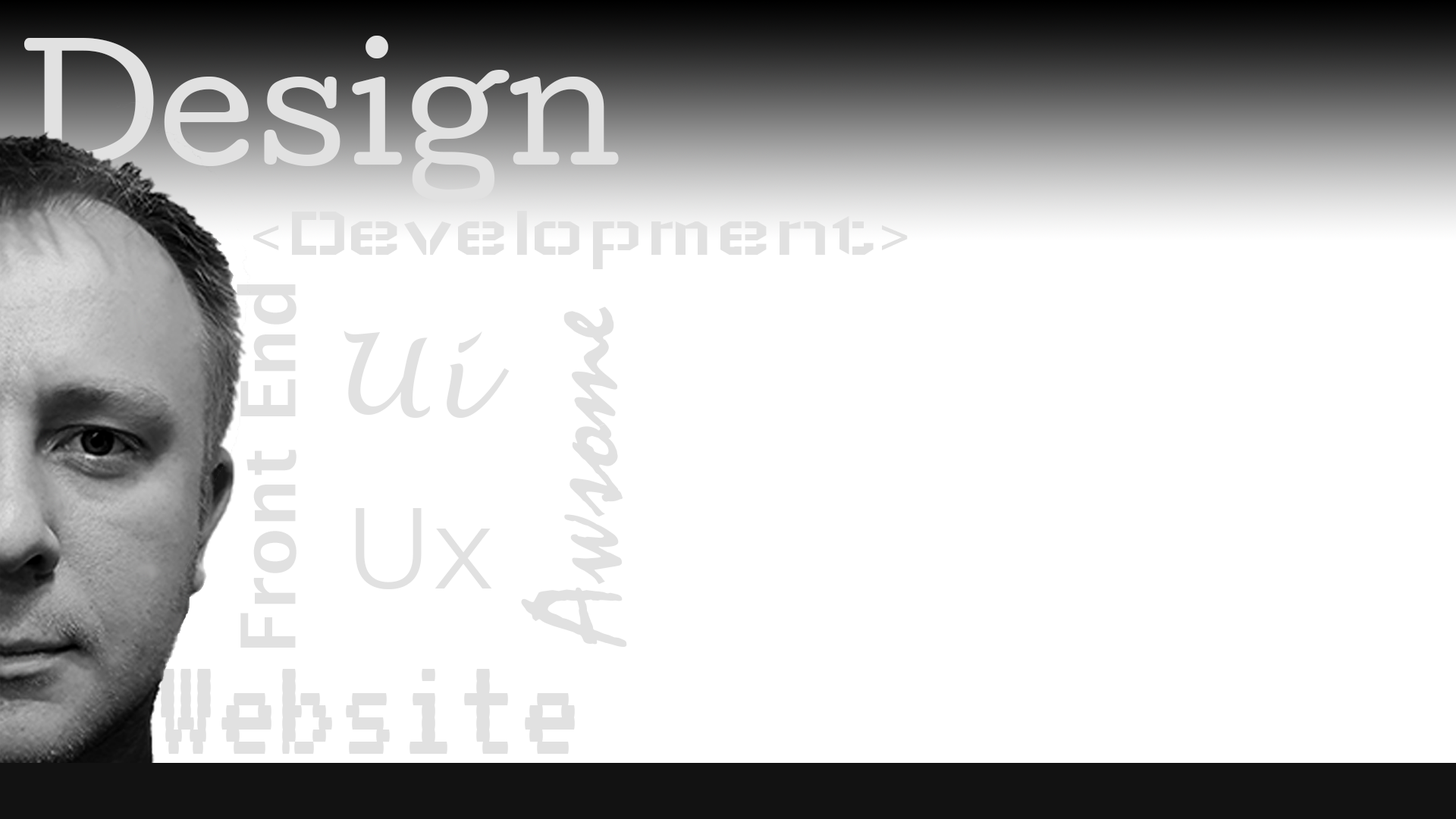
<style>
.page{position:relative;width:1456px;height:819px;background:#ffffff}
.page>*{position:absolute;margin:0}
.t1{font:151.7px "Cutive-Regular";color:#e1e1e1}
.t2{font:75.8px "Wallpoet";color:#e1e1e1}
.t3{font:75.8px "LucidaSans-Demi";color:#e1e1e1}
.t4{font:136.5px "Mistral";color:#e1e1e1}
.t5{font:113.7px "LucidaHandwriting-Italic";color:#e1e1e1}
.t6{font:113.7px "Montserrat-Regular";color:#e1e1e1}
.t7{font:151.7px "VT323-Regular";color:#e1e1e1}
</style>
<div class="page">
<p class="t1" style="left:19px;top:36px;width:600px;height:166px">Design</p>
<p class="t2" style="left:253px;top:211px;width:655px;height:58px">&lt;Development&gt;</p>
<p class="t3" style="left:237px;top:284px;width:60px;height:364px;rotate:-90deg">Front End</p>
<p class="t4" style="left:521px;top:306px;width:106px;height:341px;rotate:-90deg">Awsome</p>
<p class="t5" style="left:344px;top:331px;width:166px;height:87px">Ui</p>
<p class="t6" style="left:356px;top:508px;width:136px;height:81px">Ux</p>
<p class="t7" style="left:161px;top:669px;width:414px;height:85px">Website</p>
</div>
